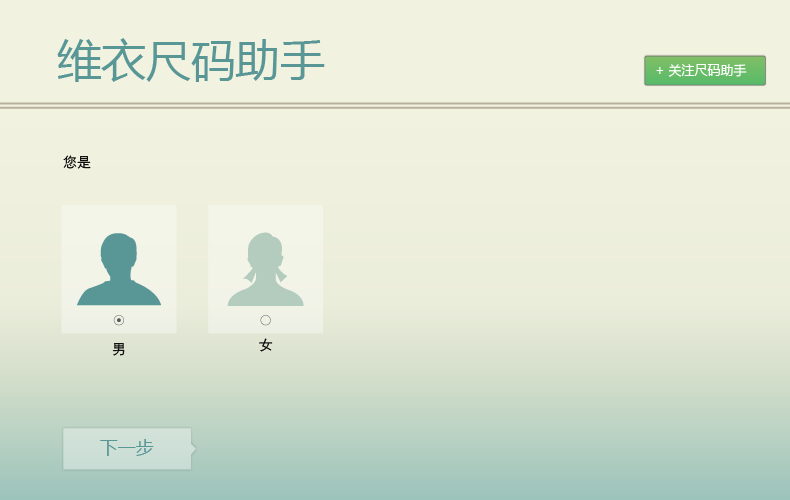
<style>
.page{position:relative;width:790px;height:500px;background:#f2f2e0}
.page>*{position:absolute;margin:0}
.t1{font:44.7px "MicrosoftYaHei";color:#599696}
.t2{font:13px "MicrosoftYaHei";color:#ffffff}
.t3{font:14px "FZZDXJW--GB1-0";color:#000000}
.t4{font:18px "MicrosoftYaHei";color:#599696}
</style>
<div class="page">
<p class="t1" style="left:57px;top:38px;width:268px;height:44px">维衣尺码助手</p>
<p class="t2" style="left:656px;top:64px;width:91px;height:13px">+ 关注尺码助手</p>
<p class="t3" style="left:63px;top:155px;width:28px;height:14px">您是</p>
<p class="t3" style="left:259px;top:338px;width:14px;height:14px">女</p>
<p class="t3" style="left:112px;top:343px;width:13px;height:13px">男</p>
<p class="t4" style="left:100px;top:439px;width:54px;height:17px">下一步</p>
</div>
